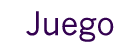
<style>
.page{position:relative;width:140px;height:50px;background:#ffffff}
.page>*{position:absolute;margin:0}
.t1{font:32px "NewsGothicMT";color:#340251}
</style>
<div class="page">
<p class="t1" style="left:26px;top:11px;width:88px;height:31px">Juego</p>
</div>
